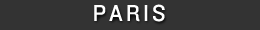
<style>
.page{position:relative;width:260px;height:30px;background:#333333}
.page>*{position:absolute;margin:0}
.t1{font:24px "Knockout-HTF31-JuniorMiddlewt";letter-spacing:0.12em;color:#ffffff}
</style>
<div class="page">
<p class="t1" style="left:94px;top:4px;width:71px;height:18px">PARIS</p>
</div>
